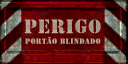
<style>
.page{position:relative;width:128px;height:64px}
.page>*{position:absolute;margin:0}
.t1{font:20.8px "Army";letter-spacing:0.04em;color:#b5ac9d;text-transform:uppercase}
.t2{font:8px "Army";letter-spacing:0.04em;color:#b5ac9d;text-transform:uppercase}
</style>
<div class="page">
<p class="t1" style="left:24px;top:19px;width:77px;height:15px">perigo</p>
<p class="t2" style="left:25px;top:36px;width:76px;height:8px">Portão blindado</p>
</div>
